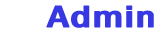
<style>
.page{position:relative;width:163px;height:33px;background:#ffffff}
.page>*{position:absolute;margin:0}
.t1{font:31.3px "FranklinGothic-MediumCond";color:#3838e3;font-weight:bold;scale:1.41 1}
</style>
<div class="page">
<p class="t1" style="left:46px;top:5px;width:108px;height:23px">Admin</p>
</div>
